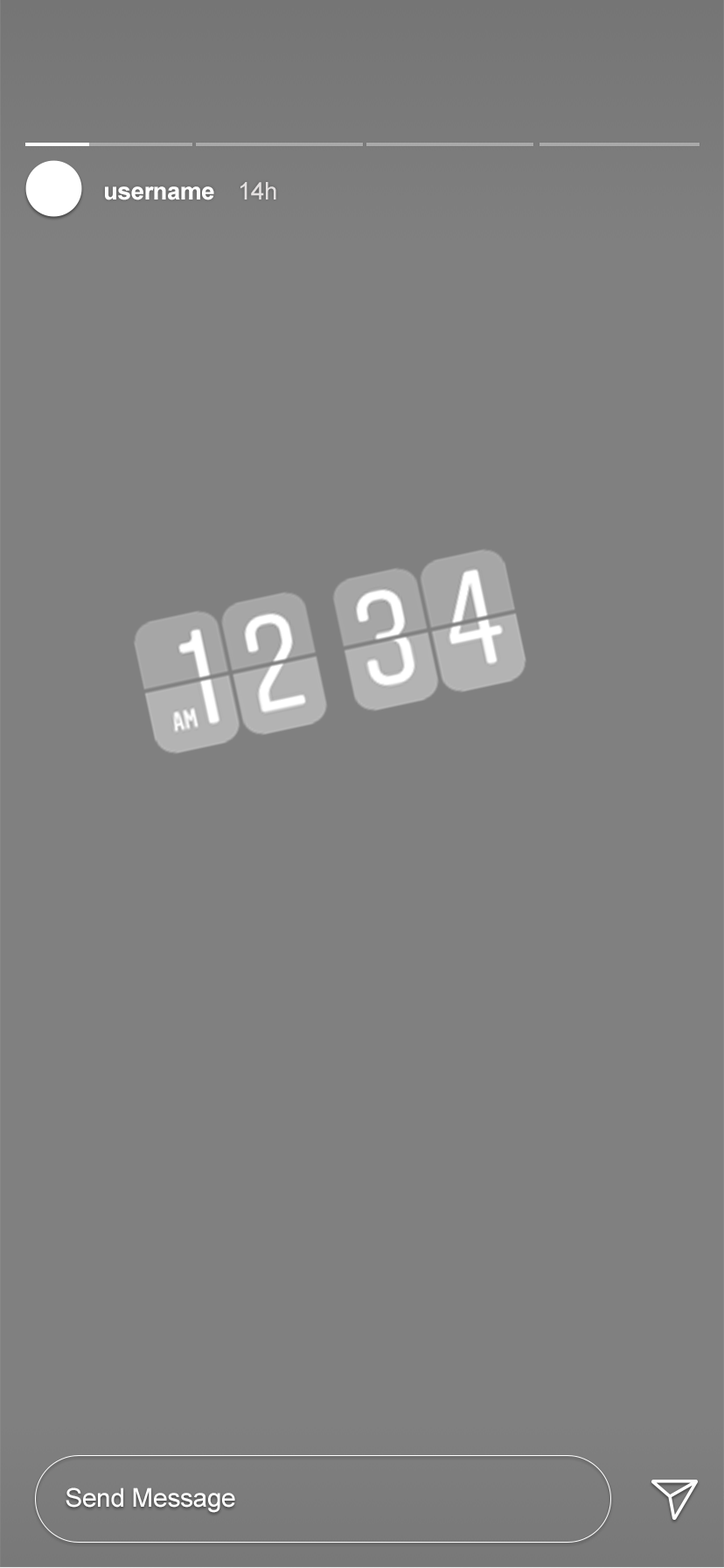
<style>
.page{position:relative;width:724px;height:1568px;background:#808080}
.page>*{position:absolute;margin:0}
.t1{font:24.5px "ArialMT";letter-spacing:-0.025em;color:#e3e0e0}
.t2{font:24.5px "Arial-BoldMT";letter-spacing:-0.025em;color:#ffffff}
.t3{font:26.1px "ArialMT";letter-spacing:-0.01em;color:#ffffff}
</style>
<div class="page">
<p class="t1" style="left:241px;top:182px;width:35px;height:18px">14h</p>
<p class="t2" style="left:105px;top:186px;width:109px;height:14px">username</p>
<p class="t3" style="left:66px;top:1488px;width:169px;height:25px">Send Message</p>
</div>
